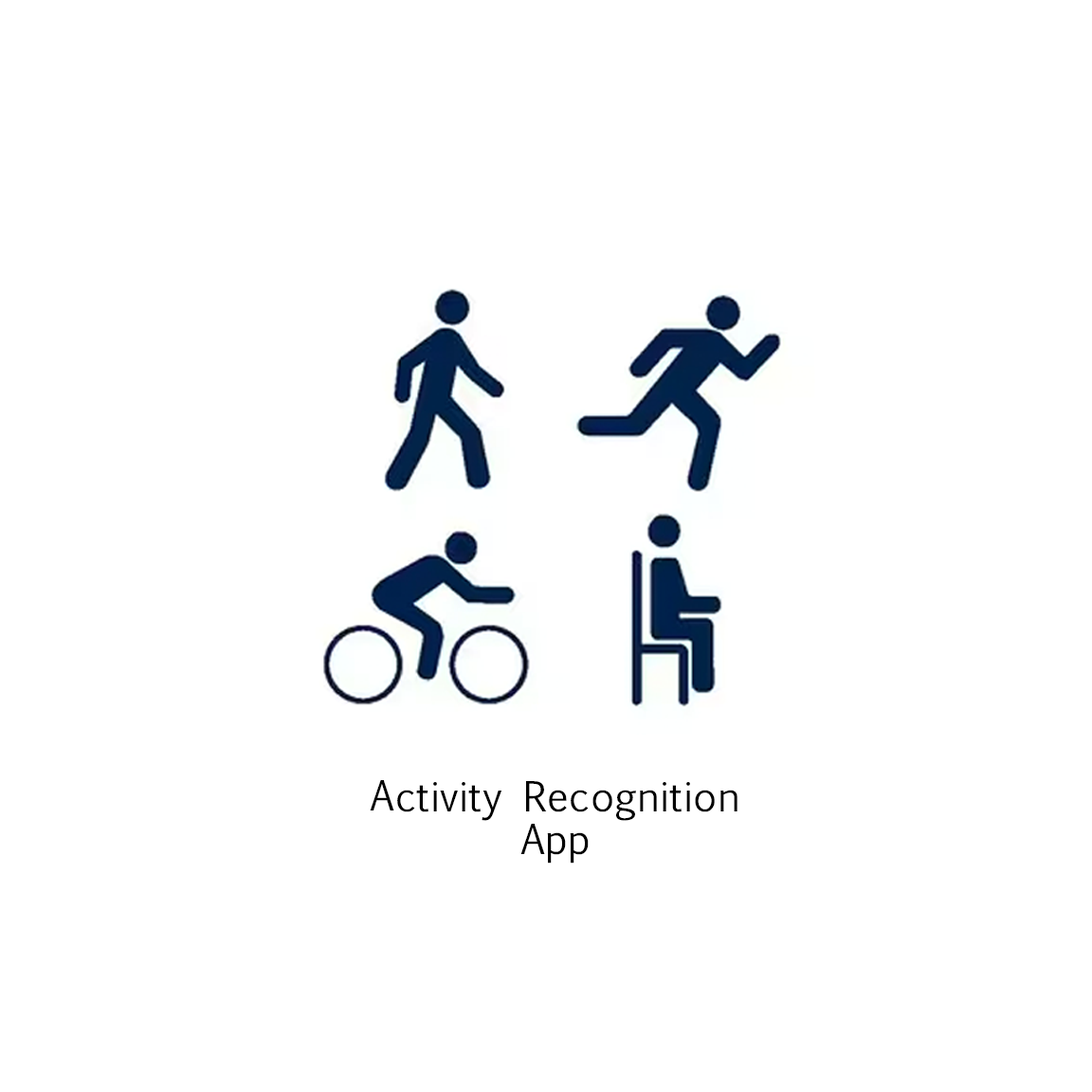
<style>
.page{position:relative;width:1092px;height:1092px;background:#ffffff}
.page>*{position:absolute;margin:0}
.t1{font:39.5px/43.4px "EuphemiaUCAS";letter-spacing:0.01em;color:#000000}
</style>
<div class="page">
<p class="t1" style="left:370px;top:780px;width:367px;height:84px;text-align:center">Activity Recognition<br>App</p>
</div>
